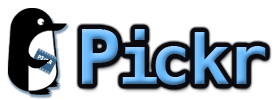
<style>
.page{position:relative;width:275px;height:100px;background:#ffffff}
.page>*{position:absolute;margin:0}
.t1{font:75px "BitstreamVeraSansMono-Bold";letter-spacing:0.02em}
.t2{font:68px "BitstreamVeraSansMono-Bold"}
.t3{font:68px "BitstreamVeraSansMono-Bold";letter-spacing:0.04em}
.t4{font:68px "BitstreamVeraSansMono-Bold";letter-spacing:-0.02em}
.t5{font:5px "BitstreamVeraSansMono-Bold";letter-spacing:0.02em}
</style>
<div class="page">
<p class="t1" style="left:82px;top:29px;width:184px;height:56px">P<span class="t2">i</span><span class="t3">c</span><span class="t2">k</span><span class="t4">r</span></p>
<p class="t5" style="left:37px;top:54px;width:16px;height:11px;rotate:27deg">PICKR</p>
</div>
